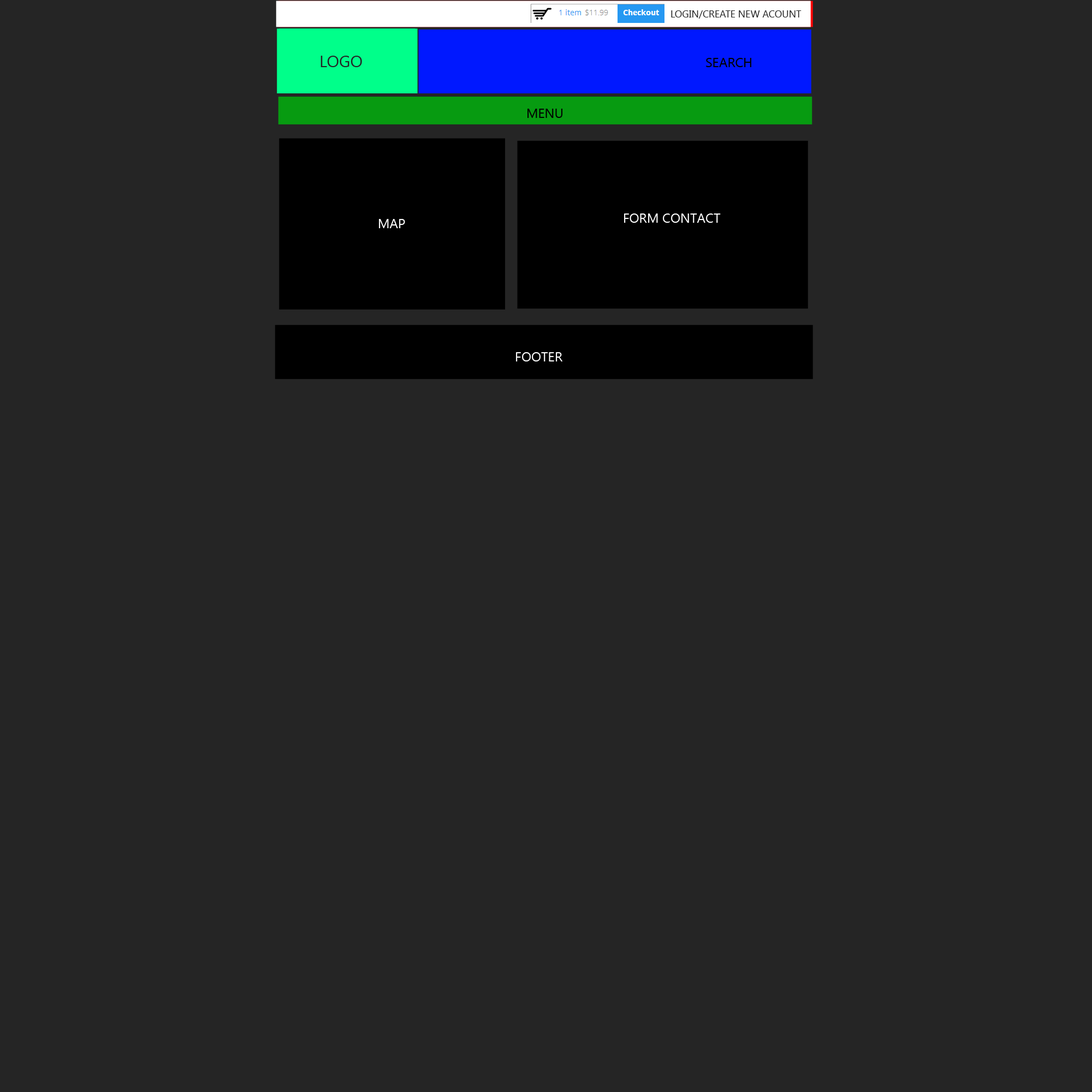
<style>
.page{position:relative;width:1092px;height:1092px;background:#252525}
.page>*{position:absolute;margin:0}
.t1{font:9.8px "SegoeUI";color:#252525;text-transform:uppercase}
.t2{font:16.4px "SegoeUI";color:#252525;text-transform:uppercase}
.t3{font:13.1px "SegoeUI";color:#000000;text-transform:uppercase}
.t4{font:13.1px "SegoeUI";color:#ffffff;text-transform:uppercase}
</style>
<div class="page">
<p class="t1" style="left:671px;top:10px;width:131px;height:9px">login/create new acount</p>
<p class="t2" style="left:320px;top:56px;width:42px;height:11px">Logo</p>
<p class="t3" style="left:706px;top:58px;width:45px;height:9px">search</p>
<p class="t3" style="left:527px;top:109px;width:36px;height:9px">menu</p>
<p class="t4" style="left:379px;top:219px;width:26px;height:9px">map</p>
<p class="t4" style="left:624px;top:213px;width:97px;height:10px">form contact</p>
<p class="t4" style="left:516px;top:352px;width:47px;height:9px">footer</p>
</div>
